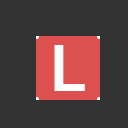
<style>
.page{position:relative;width:128px;height:128px;background:#333333}
.page>*{position:absolute;margin:0}
.t1{font:62.5px "DINAlternate-Bold";color:#ffffff;font-weight:bold}
</style>
<div class="page">
<p class="t1" style="left:54px;top:45px;width:31px;height:46px">L</p>
</div>
